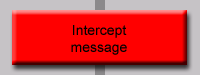
<style>
.page{position:relative;width:200px;height:75px;background:#ff0000}
.page>*{position:absolute;margin:0}
.t1{font:14px "ArialMT";color:#000000}
</style>
<div class="page">
<p class="t1" style="left:71px;top:25px;width:56px;height:30px;text-align:center">Intercept<br>message</p>
</div>
